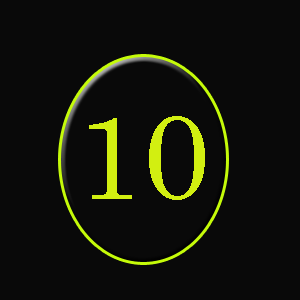
<style>
.page{position:relative;width:300px;height:300px;background:#090909}
.page>*{position:absolute;margin:0}
.t1{font:120px "Century";color:#d2ef11}
</style>
<div class="page">
<p class="t1" style="left:89px;top:116px;width:116px;height:84px">10</p>
</div>
